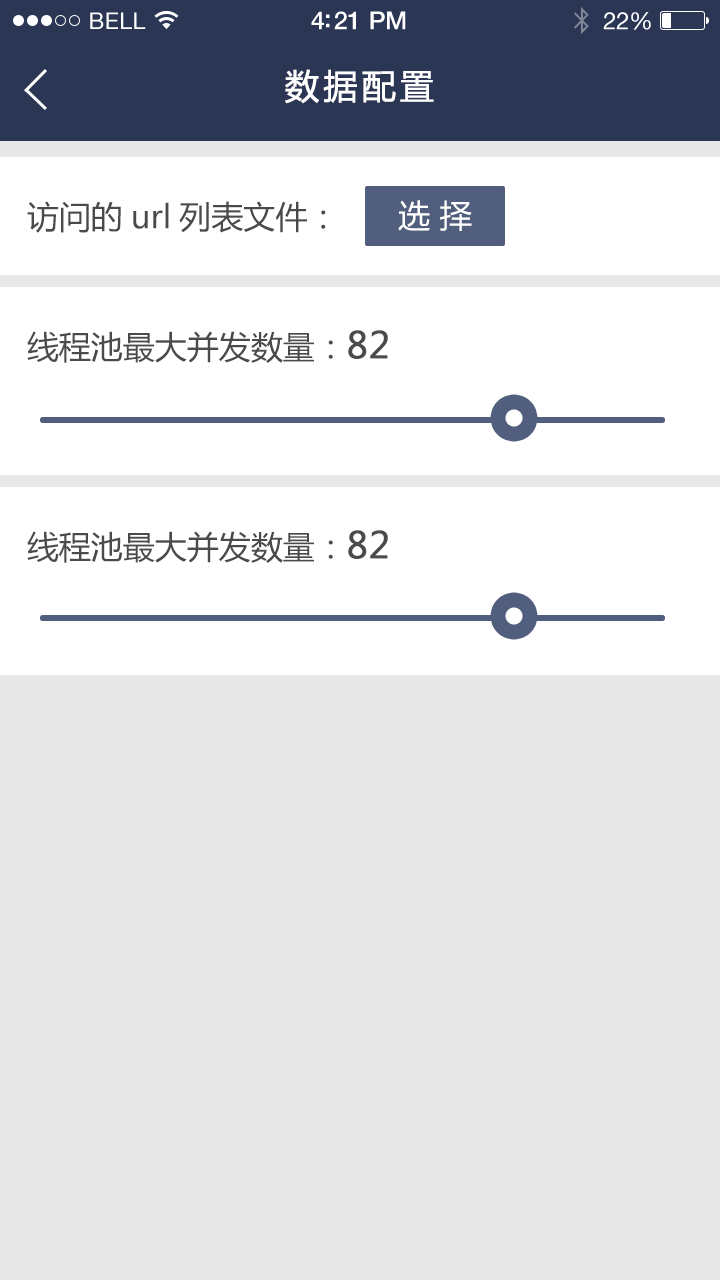
<style>
.page{position:relative;width:720px;height:1280px;background:#e7e7e7}
.page>*{position:absolute;margin:0}
.t1{font:23px "HelveticaNeue";letter-spacing:0.02em;color:#ffffff}
.t2{font:25px "HelveticaNeue-Medium";letter-spacing:-0.02em;color:#ffffff}
.t3{font:24px "HelveticaNeue";letter-spacing:-0.02em;color:#ffffff}
.t4{font:34px "MicrosoftYaHei";letter-spacing:0.1em;color:#ffffff;font-weight:bold}
.t5{font:32px "MicrosoftYaHei";color:#4b4a4a}
.t6{font:32px "MicrosoftYaHei";color:#ffffff}
.t7{font:36px "MicrosoftYaHei";color:#4b4a4a;font-weight:bold}
</style>
<div class="page">
<p class="t1" style="left:90px;top:12px;width:56px;height:17px">BELL</p>
<p class="t2" style="left:311px;top:11px;width:95px;height:19px">4:21 PM</p>
<p class="t3" style="left:603px;top:12px;width:48px;height:18px">22%</p>
<p class="t4" style="left:285px;top:69px;width:149px;height:35px">数据配置</p>
<p class="t5" style="left:27px;top:201px;width:299px;height:32px">访问的url列表文件：</p>
<p class="t6" style="left:398px;top:200px;width:74px;height:31px">选 择</p>
<p class="t5" style="left:27px;top:330px;width:361px;height:33px">线程池最大并发数量：<span class="t7">82</span></p>
<p class="t5" style="left:27px;top:530px;width:361px;height:33px">线程池最大并发数量：<span class="t7">82</span></p>
</div>
